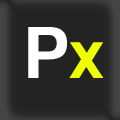
<style>
.page{position:relative;width:120px;height:120px;background:#232323}
.page>*{position:absolute;margin:0}
.t1{font:73px "KoHo-Bold";color:#ffffff}
.t2{font:76px "KoHo-Bold";color:#efff00}
</style>
<div class="page">
<p class="t1" style="left:28px;top:26px;width:40px;height:52px">P</p>
<p class="t2" style="left:69px;top:42px;width:35px;height:36px">x</p>
</div>
